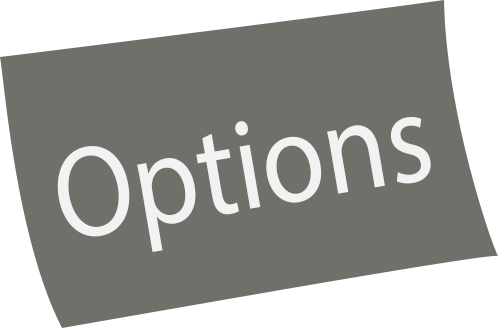
<style>
.page{position:relative;width:498px;height:328px;background:#706f69}
.page>*{position:absolute;margin:0}
.t1{font:129.8px "MyriadPro-Regular";color:#f2f2f2;scale:0.88 1}
</style>
<div class="page">
<p class="t1" style="left:57px;top:117px;width:374px;height:135px;rotate:-10deg">Options</p>
</div>
